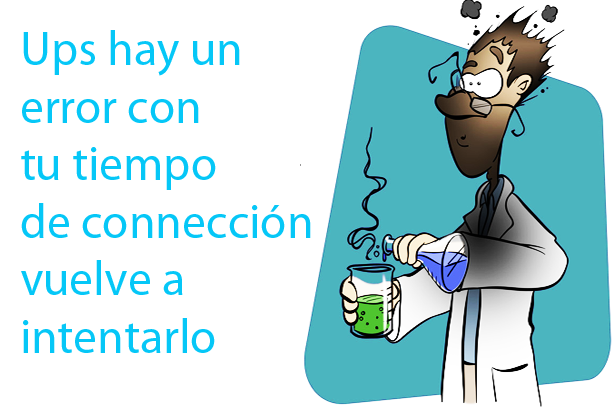
<style>
.page{position:relative;width:615px;height:413px;background:#ffffff}
.page>*{position:absolute;margin:0}
.t1{font:48px "MyriadPro-Regular";color:#05c7f7}
</style>
<div class="page">
<p class="t1" style="left:21px;top:30px;width:290px;height:323px">Ups hay un <br>error con <br>tu tiempo <br>de connección<br>vuelve a <br>intentarlo</p>
</div>
